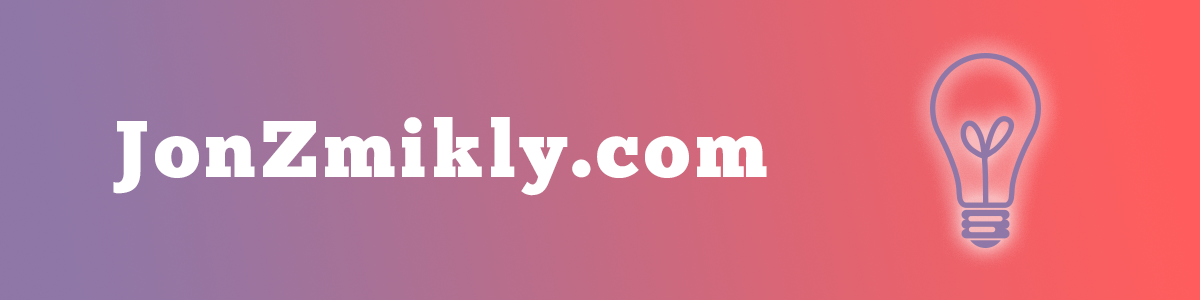
<style>
.page{position:relative;width:1200px;height:300px}
.page>*{position:absolute;margin:0}
.t1{font:80px "ChunkFive-Roman";letter-spacing:0.06em;color:#ffffff}
</style>
<div class="page">
<p class="t1" style="left:113px;top:117px;width:654px;height:79px">JonZmikly.com</p>
</div>
